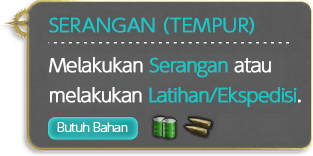
<style>
.page{position:relative;width:313px;height:156px}
.page>*{position:absolute;margin:0}
.t1{font:18px/40px "UDShinGoPro-Light";color:#14c9cb;font-weight:bold}
.t2{font:18px/40px "UDShinGoPro-Light";letter-spacing:-0.04em;color:#ffffff;font-weight:bold}
.t3{font:18px/40px "UDShinGoPro-Light";letter-spacing:-0.04em;color:#14c9cb;font-weight:bold}
.t4{font:18px/40px "UDShinGoPro-Light";letter-spacing:-0.04em;color:#fefefe;font-weight:bold}
.t5{font:18px/30px "UDShinGoPro-Light";letter-spacing:-0.04em;color:#ffffff;font-weight:bold}
.t6{font:18px/30px "UDShinGoPro-Light";letter-spacing:-0.04em;color:#14c9cb;font-weight:bold}
.t7{font:12px "UDShinGoPro-Light";letter-spacing:-0.04em;color:#ffffff}
</style>
<div class="page">
<p class="t1" style="left:49px;top:17px;width:252px;height:90px">SERANGAN (TEMPUR)<br><span class="t2">Melakukan </span><span class="t3">Serangan </span><span class="t4">atau<br></span><span class="t5">melakukan </span><span class="t6">Latihan/Ekspedisi</span><span class="t5">.</span></p>
<p class="t7" style="left:57px;top:122px;width:71px;height:10px">Butuh Bahan</p>
</div>
